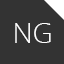
<style>
.page{position:relative;width:64px;height:64px;background:#333333}
.page>*{position:absolute;margin:0}
.t1{font:28px "OpenSans-Light";color:#ffffff}
</style>
<div class="page">
<p class="t1" style="left:15px;top:23px;width:36px;height:20px">NG</p>
</div>
